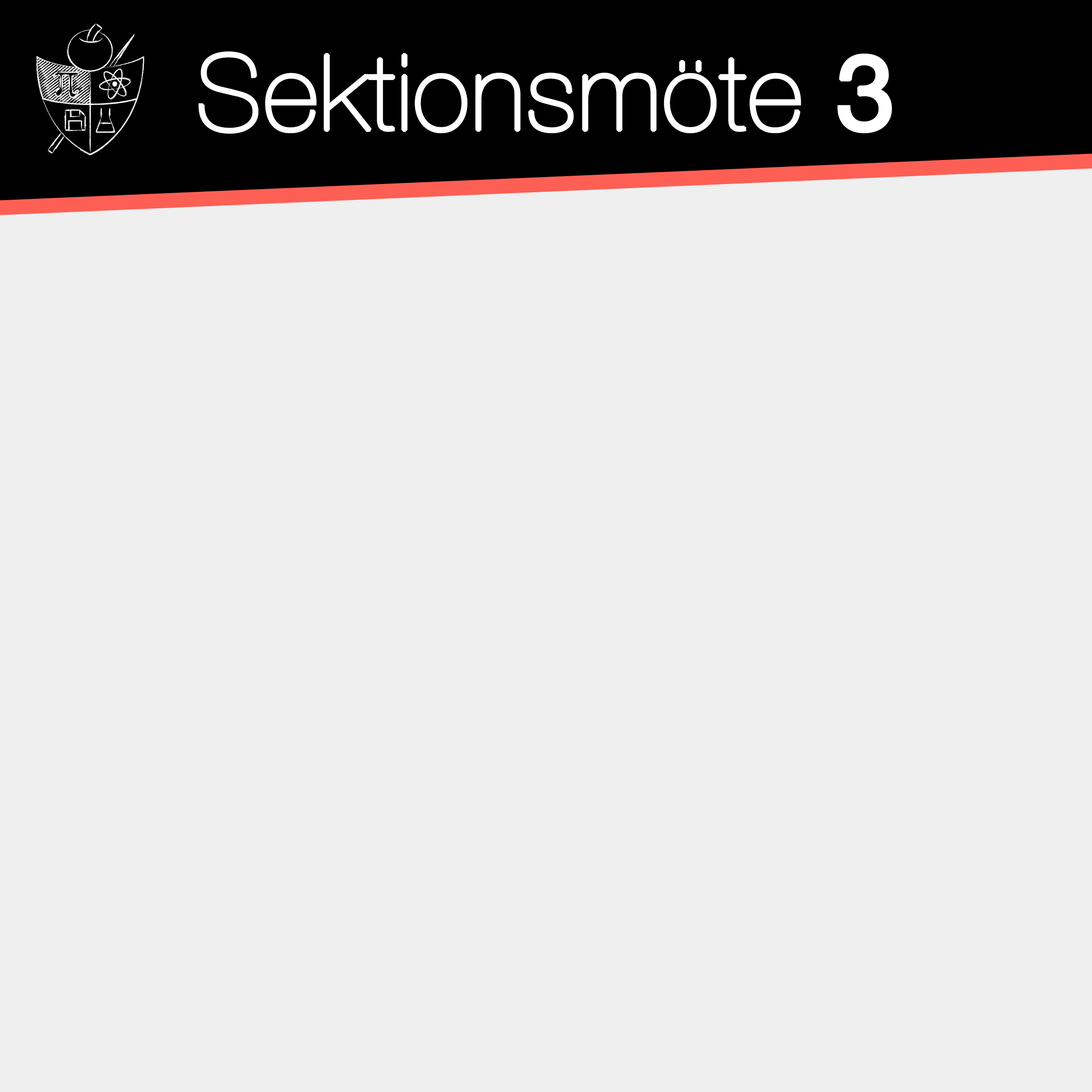
<style>
.page{position:relative;width:1092px;height:1092px;background:#efefef}
.page>*{position:absolute;margin:0}
.t1{font:105px "HelveticaNeue-UltraLight";color:#ffffff;font-weight:bold}
.t2{font:105px "HelveticaNeue";color:#ffffff;font-weight:bold}
</style>
<div class="page">
<p class="t1" style="left:198px;top:51px;width:694px;height:83px">Sektionsmöte<span class="t2"> 3</span></p>
</div>
